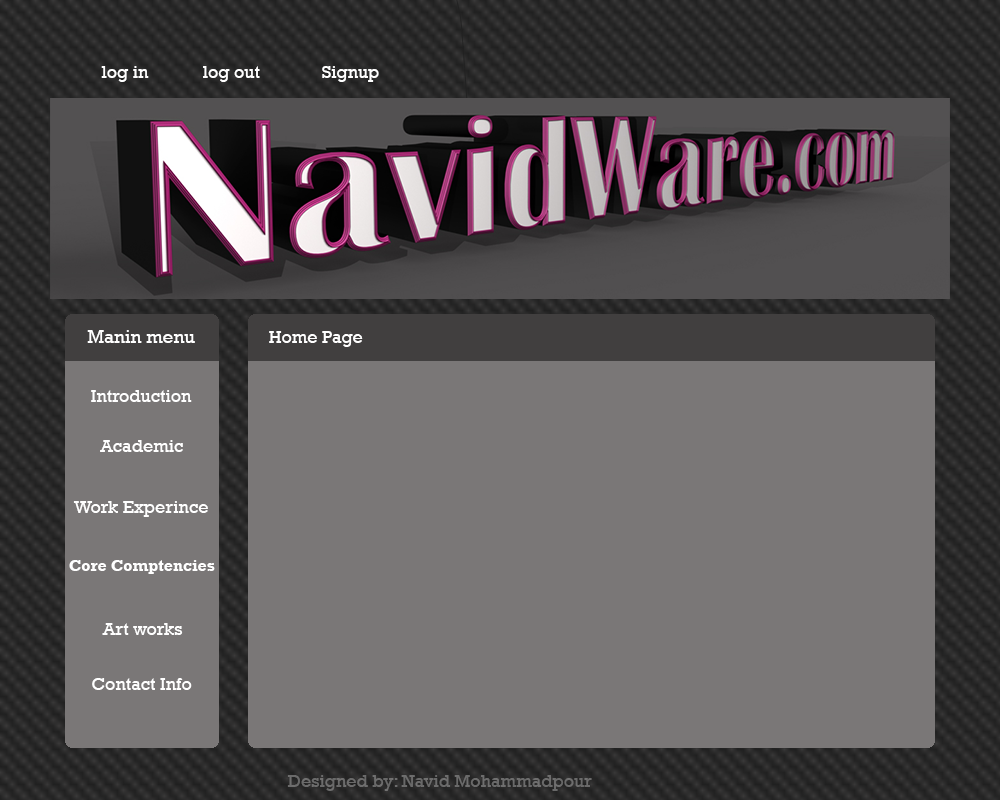
<style>
.page{position:relative;width:1000px;height:800px;background:#7a7777}
.page>*{position:absolute;margin:0}
.t1{font:18px "Rockwell";color:#ffffff}
.t2{font:19px "Rockwell";color:#ffffff}
.t3{font:16px "Rockwell-Bold";color:#ffffff}
.t4{font:18px "Rockwell";color:#6c6c6c}
</style>
<div class="page">
<p class="t1" style="left:101px;top:66px;width:48px;height:16px">log in</p>
<p class="t1" style="left:203px;top:66px;width:57px;height:16px">log out</p>
<p class="t1" style="left:322px;top:66px;width:57px;height:16px">Signup</p>
<p class="t2" style="left:87px;top:330px;width:108px;height:13px">Manin menu</p>
<p class="t1" style="left:269px;top:331px;width:94px;height:16px">Home Page</p>
<p class="t1" style="left:91px;top:390px;width:101px;height:12px">Introduction</p>
<p class="t1" style="left:100px;top:440px;width:83px;height:12px">Academic</p>
<p class="t1" style="left:73px;top:501px;width:135px;height:16px">Work Experince</p>
<p class="t3" style="left:69px;top:560px;width:146px;height:14px">Core Comptencies</p>
<p class="t1" style="left:102px;top:623px;width:81px;height:12px">Art works</p>
<p class="t1" style="left:92px;top:678px;width:100px;height:12px">Contact Info</p>
<p class="t4" style="left:287px;top:775px;width:305px;height:16px">Designed by: Navid Mohammadpour</p>
</div>
